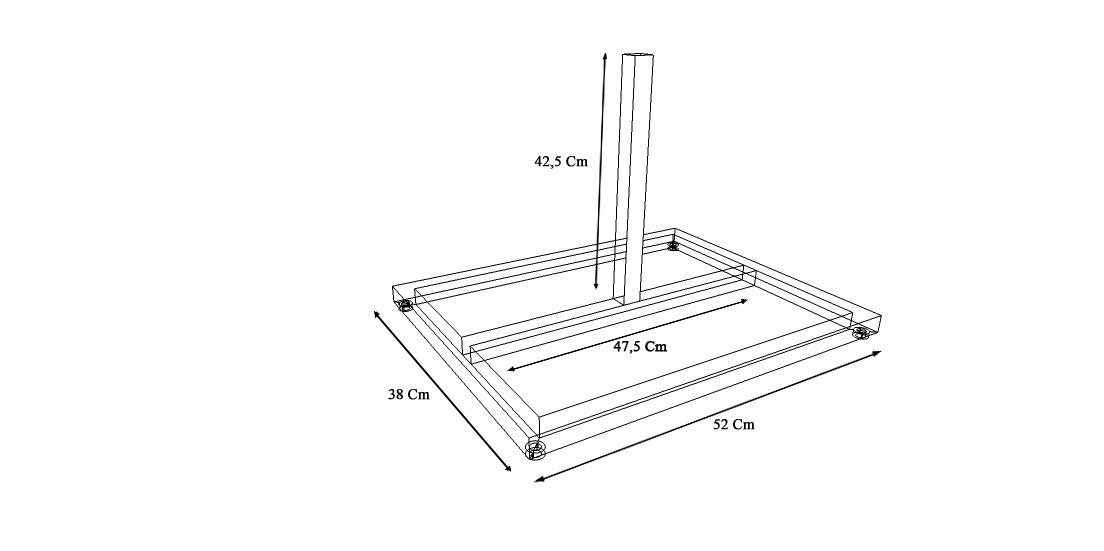
<style>
.page{position:relative;width:1104px;height:551px;background:#ffffff}
.page>*{position:absolute;margin:0}
.t1{font:14.7px "TimesNewRomanPSMT";color:#000000;font-weight:bold}
.t2{font:14.7px "TimesNewRomanPSMT";color:#030303;font-weight:bold}
</style>
<div class="page">
<p class="t1" style="left:534px;top:156px;width:54px;height:13px">42,5 Cm</p>
<p class="t2" style="left:613px;top:341px;width:55px;height:13px">47,5 Cm</p>
<p class="t1" style="left:388px;top:389px;width:42px;height:11px">38 Cm</p>
<p class="t1" style="left:713px;top:419px;width:42px;height:11px">52 Cm</p>
</div>
